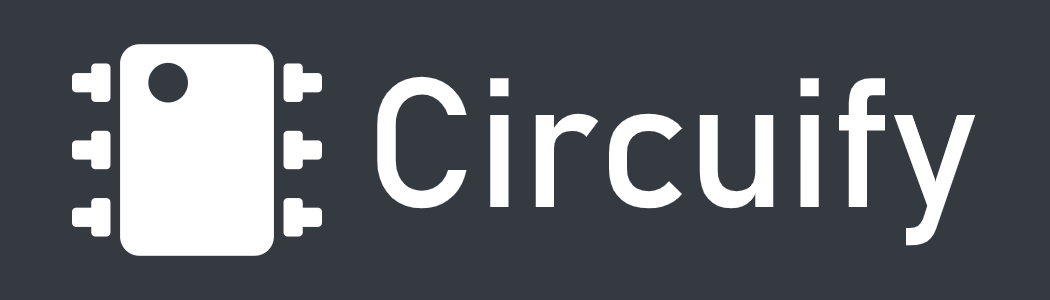
<style>
.page{position:relative;width:1050px;height:300px;background:#343a40}
.page>*{position:absolute;margin:0}
.t1{font:181.5px "Bahnschrift";color:#ffffff}
</style>
<div class="page">
<p class="t1" style="left:377px;top:76px;width:599px;height:170px">Circuify</p>
</div>
